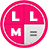
<style>
.page{position:relative;width:48px;height:48px;background:#ffffff}
.page>*{position:absolute;margin:0}
.t1{font:13.3px "Montserrat-Black";letter-spacing:0.04em;color:#ffffff}
.t2{font:11.3px "Montserrat-Black";letter-spacing:0.04em;color:#ffffff}
</style>
<div class="page">
<p class="t1" style="left:12px;top:11px;width:8px;height:10px">L</p>
<p class="t1" style="left:30px;top:11px;width:8px;height:10px">L</p>
<p class="t2" style="left:11px;top:28px;width:10px;height:8px">M</p>
</div>
